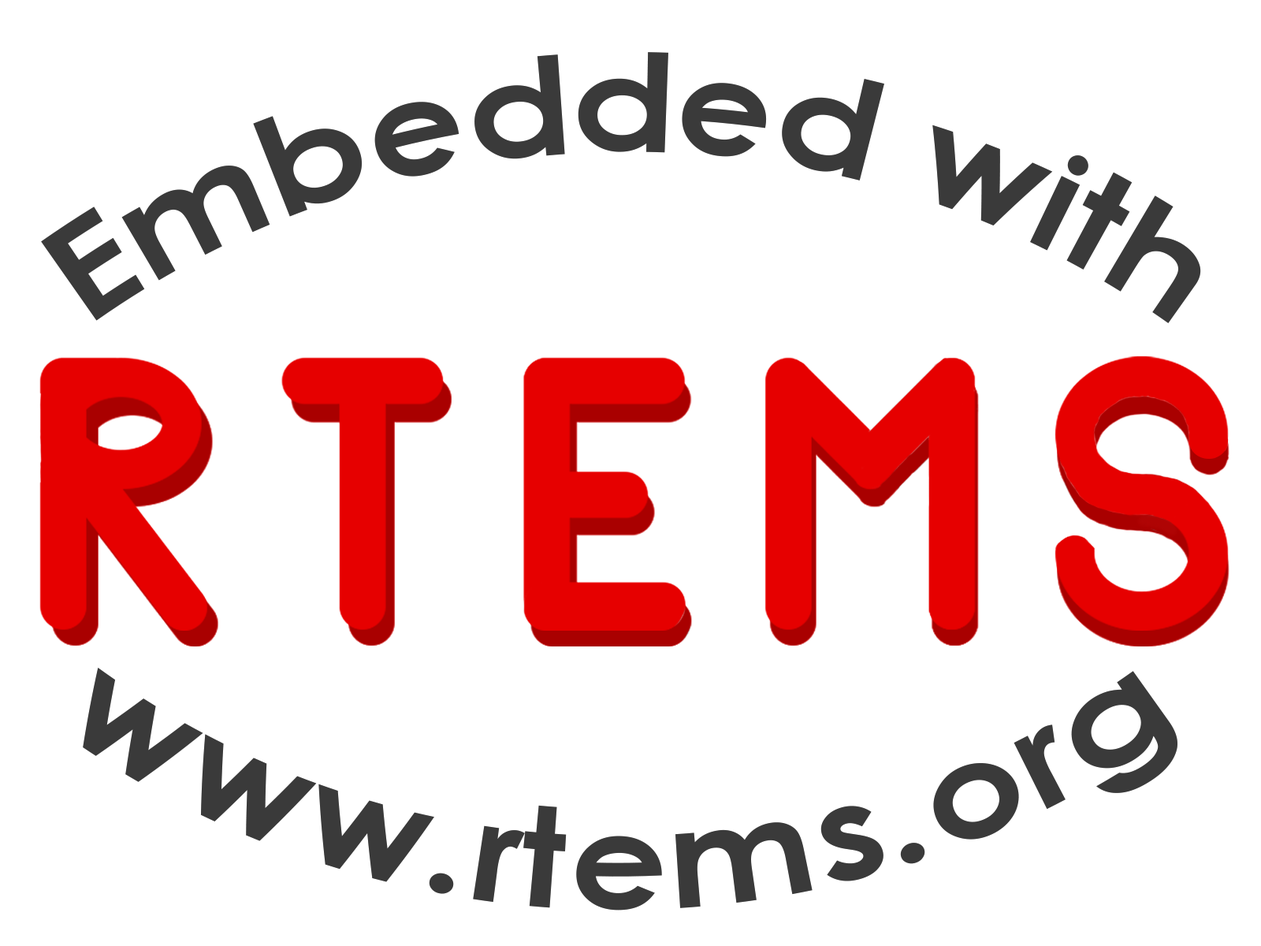
<style>
.page{position:relative;width:1261px;height:946px;background:#ffffff}
.page>*{position:absolute;margin:0}
.t1{font:137.3px "CenturyGothic-Bold";color:#3a3a3a}
</style>
<div class="page">
<p class="t1" style="left:41px;top:52px;width:1160px;height:271px">Embedded with</p>
<p class="t1" style="left:83px;top:667px;width:1094px;height:243px;text-align:center">www.rtems.org</p>
</div>
